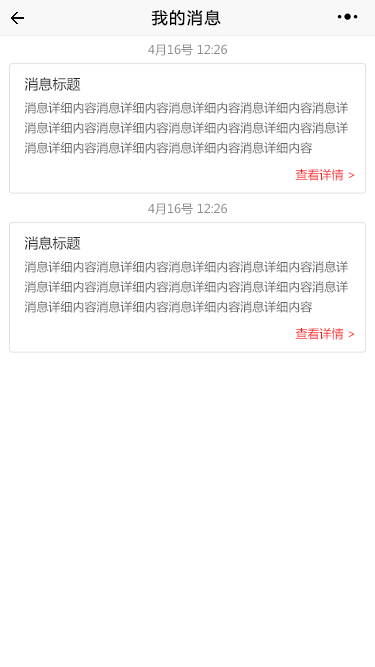
<style>
.page{position:relative;width:375px;height:667px;background:#ffffff}
.page>*{position:absolute;margin:0}
.t1{font:16px "MicrosoftYaHei";letter-spacing:0.1em;color:#020202}
.t2{font:12px "MicrosoftYaHei";color:#8e8d8d}
.t3{font:14px "MicrosoftYaHei";color:#2a2a2a}
.t4{font:12px/20px "MicrosoftYaHei";color:#646464}
.t5{font:12px "MicrosoftYaHei";color:#ff181d}
</style>
<div class="page">
<p class="t1" style="left:151px;top:10px;width:70px;height:16px">我的消息</p>
<p class="t2" style="left:148px;top:44px;width:79px;height:12px">4月16号 12:26</p>
<p class="t3" style="left:24px;top:77px;width:57px;height:14px">消息标题</p>
<p class="t4" style="left:24px;top:102px;width:324px;height:52px">消息详细内容消息详细内容消息详细内容消息详细内容消息详<br>消息详细内容消息详细内容消息详细内容消息详细内容消息详<br>消息详细内容消息详细内容消息详细内容消息详细内容</p>
<p class="t5" style="left:295px;top:169px;width:60px;height:12px">查看详情 &gt;</p>
<p class="t2" style="left:148px;top:203px;width:79px;height:12px">4月16号 12:26</p>
<p class="t3" style="left:24px;top:236px;width:57px;height:14px">消息标题</p>
<p class="t4" style="left:24px;top:261px;width:324px;height:52px">消息详细内容消息详细内容消息详细内容消息详细内容消息详<br>消息详细内容消息详细内容消息详细内容消息详细内容消息详<br>消息详细内容消息详细内容消息详细内容消息详细内容</p>
<p class="t5" style="left:295px;top:328px;width:60px;height:12px">查看详情 &gt;</p>
</div>
